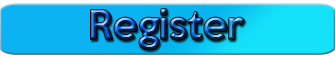
<style>
.page{position:relative;width:335px;height:58px;background:#0bb3f2}
.page>*{position:absolute;margin:0}
.t1{font:36px "KeepCalm-Medium"}
</style>
<div class="page">
<p class="t1" style="left:91px;top:9px;width:154px;height:40px">Register</p>
</div>
